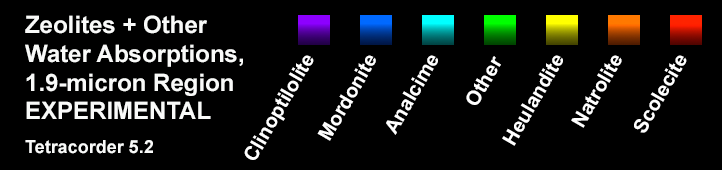
<style>
.page{position:relative;width:722px;height:170px;background:#000000}
.page>*{position:absolute;margin:0}
.t1{font:24px "Arial-BoldMT";color:#f9faf9}
.t2{font:18px "Arial-BoldMT";color:#f9faf9}
.t3{font:20px "Arial-BoldMT";color:#ffffff}
</style>
<div class="page">
<p class="t1" style="left:25px;top:15px;width:218px;height:139px">Zeolites + Other<br>Water Absorptions,<br>1.9-micron Region<br>EXPERIMENTAL<br><br><span class="t2">Tetracorder 5.2</span></p>
<p class="t3" style="left:244px;top:55px;width:70px;height:105px;rotate:-60deg">Clinoptilolite</p>
<p class="t3" style="left:317px;top:55px;width:59px;height:86px;rotate:-60deg">Mordonite</p>
<p class="t3" style="left:386px;top:55px;width:52px;height:80px;rotate:-60deg">Analcime</p>
<p class="t3" style="left:466px;top:56px;width:35px;height:49px;rotate:-60deg">Other</p>
<p class="t3" style="left:502px;top:55px;width:61px;height:91px;rotate:-60deg">Heulandite</p>
<p class="t3" style="left:571px;top:55px;width:51px;height:73px;rotate:-60deg">Natrolite</p>
<p class="t3" style="left:634px;top:55px;width:53px;height:78px;rotate:-60deg">Scolecite</p>
</div>
